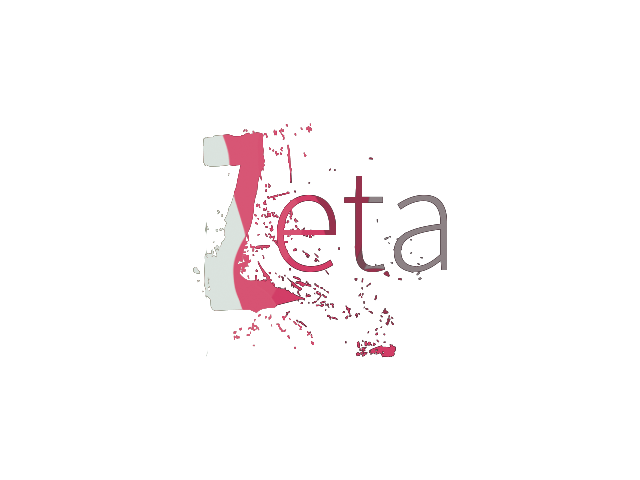
<style>
.page{position:relative;width:640px;height:480px;background:#ffffff}
.page>*{position:absolute;margin:0}
.t1{font:150px "SourceSansPro-Light"}
</style>
<div class="page">
<p class="t1" style="left:277px;top:176px;width:170px;height:96px">eta</p>
</div>
